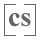
<style>
.page{position:relative;width:40px;height:40px;background:#ffffff}
.page>*{position:absolute;margin:0}
.t1{font:28px "TimesNewRomanPS-BoldMT";color:#656565}
</style>
<div class="page">
<p class="t1" style="left:9px;top:13px;width:22px;height:14px">cs</p>
</div>
